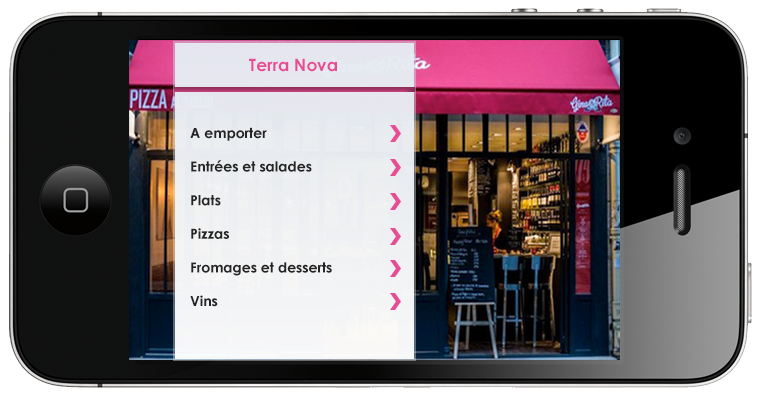
<style>
.page{position:relative;width:761px;height:395px}
.page>*{position:absolute;margin:0}
.t1{font:17px "CenturyGothic-Bold";color:#e74d93}
.t2{font:14px "CenturyGothic-Bold";color:#252525}
</style>
<div class="page">
<p class="t1" style="left:249px;top:58px;width:88px;height:14px">Terra Nova</p>
<p class="t2" style="left:190px;top:127px;width:142px;height:180px">A emporter<br><br>Entrées et salades<br><br>Plats<br><br>Pizzas<br><br>Fromages et desserts<br><br>Vins</p>
</div>
